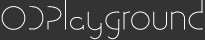
<style>
.page{position:relative;width:205px;height:40px;background:#333333}
.page>*{position:absolute;margin:0}
.t1{font:33px "Existence-Light";color:#ffffff}
</style>
<div class="page">
<p class="t1" style="left:1px;top:0px;width:202px;height:40px">ODPlayground</p>
</div>
